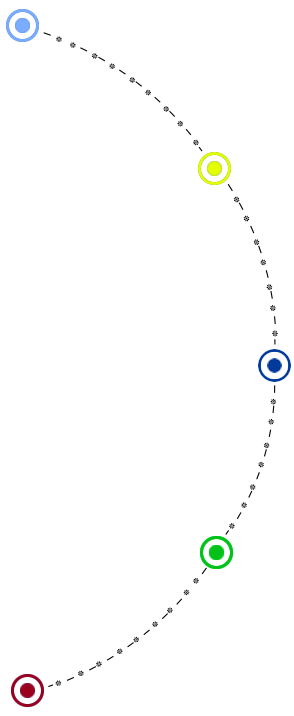
<style>
.page{position:relative;width:294px;height:716px;background:#ffffff}
.page>*{position:absolute;margin:0}
.t1{font:12px "BNazaninBold";color:#000000}
.t2{font:18px "BNazaninBold";color:#000000}
.t3{font:12.1px "BNazaninBold";color:#000000;scale:1.03 1}
.t4{font:18.2px "BNazaninBold";color:#000000;scale:1.03 1}
.t5{font:12.1px "BNazaninBold";color:#000000;scale:0.97 1}
.t6{font:18.2px "BNazaninBold";color:#000000;scale:0.97 1}
</style>
<div class="page">
<p class="t1" style="left:43px;top:32px;width:160px;height:120px;rotate:37deg">- *<span class="t2"> - </span>*<span class="t2"> -</span>*<span class="t2"> - </span>*<span class="t2"> -</span>*<span class="t2"> - </span>*<span class="t2"> -</span>*<span class="t2"> - </span>*  *<span class="t2"> -</span></p>
<p class="t3" style="left:227px;top:183px;width:51px;height:162px;rotate:73deg">- *<span class="t4"> - </span>*<span class="t4"> -</span>*<span class="t4"> - </span>*<span class="t4"> -</span>*<span class="t4"> - </span>*<span class="t4"> -</span>*<span class="t4"> -</span></p>
<p class="t5" style="left:225px;top:385px;width:52px;height:150px;rotate:107deg">- *<span class="t6"> - </span>*<span class="t6"> -</span>*<span class="t6"> - </span>*<span class="t6"> -</span>*<span class="t6"> - </span>*<span class="t6"> -</span>*<span class="t6"> -</span></p>
<p class="t1" style="left:48px;top:567px;width:159px;height:121px;rotate:143deg">- *<span class="t2"> - </span>*<span class="t2"> -</span>*<span class="t2"> - </span>*<span class="t2"> -</span>*<span class="t2"> - </span>*<span class="t2"> -</span>*<span class="t2"> - </span>*  *<span class="t2"> -</span></p>
</div>
